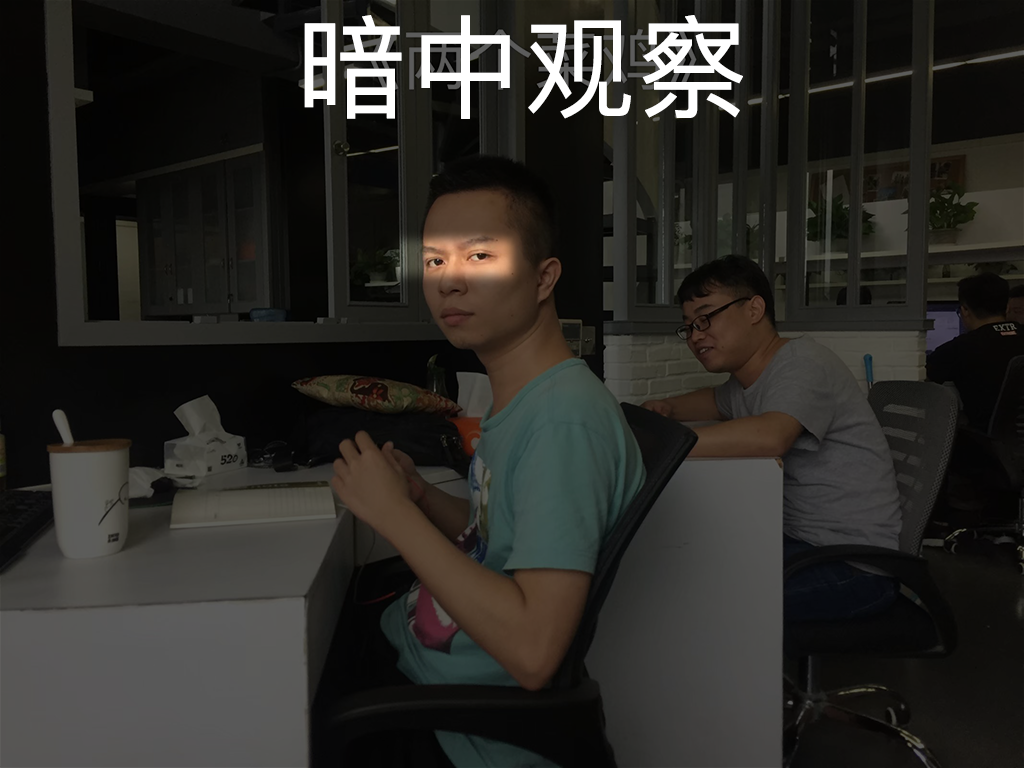
<style>
.page{position:relative;width:1024px;height:768px}
.page>*{position:absolute;margin:0}
.t1{font:110.9px "PingFangSC-Regular";color:#ffffff;font-weight:bold}
</style>
<div class="page">
<p class="t1" style="left:304px;top:15px;width:439px;height:104px">暗中观察</p>
</div>
